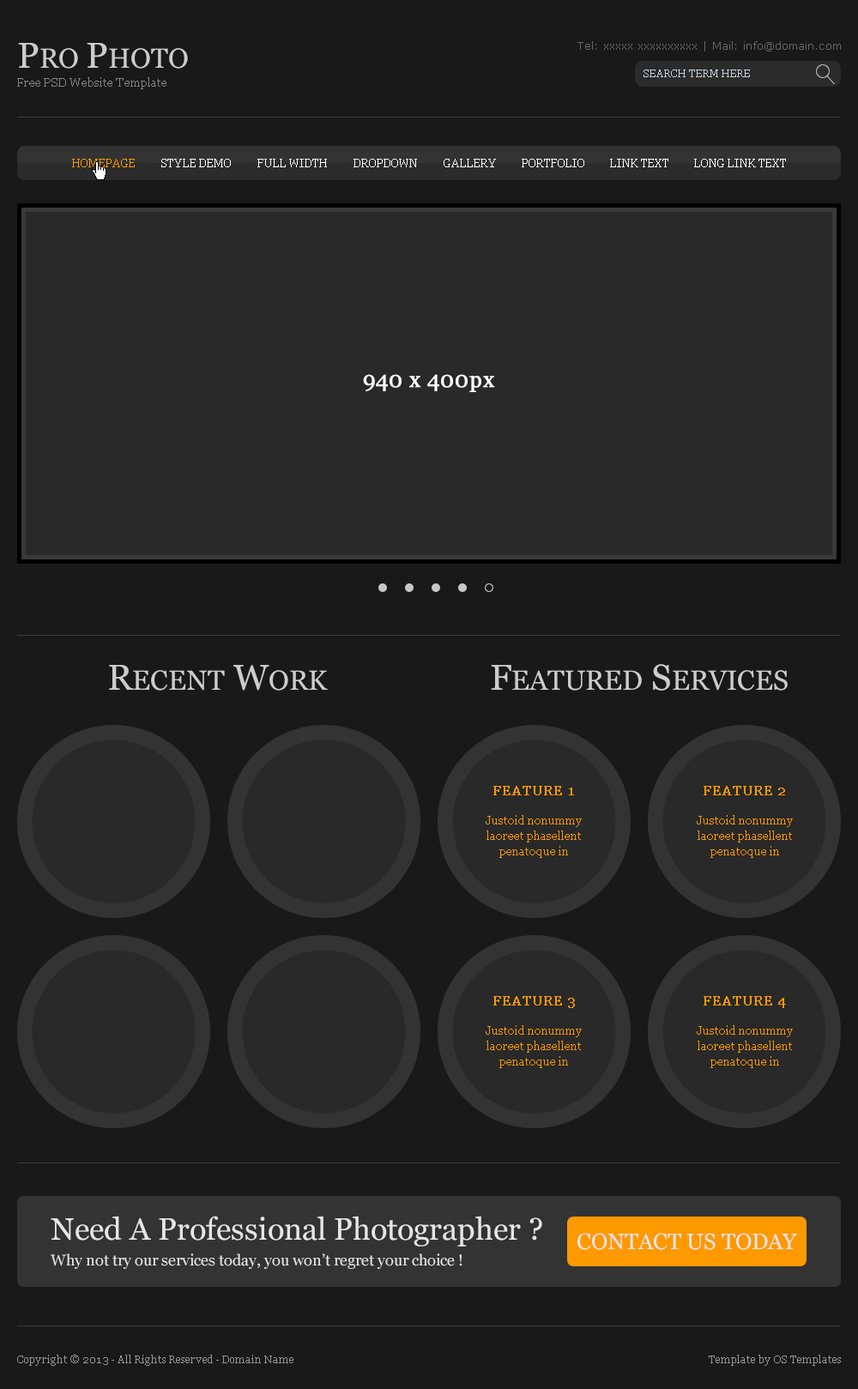
<style>
.page{position:relative;width:858px;height:1389px;background:#191919}
.page>*{position:absolute;margin:0}
.t1{font:11.2px "Verdana";color:#676767}
.t2{font:27.5px "Georgia";color:#cccccc}
.t3{font:36px "Georgia";color:#cccccc}
.t4{font:12px "Georgia";color:#858585}
.t5{font:10.3px "Georgia";color:#c7ced6}
.t6{font:11.2px "Georgia";color:#ff9900}
.t7{font:11.2px "Georgia";color:#ffffff}
.t8{font:22.3px "Georgia";color:#ffffff;font-weight:bold}
.t9{font:13.7px "Georgia";color:#ff9900;font-weight:bold}
.t10{font:11.2px/15.6px "Georgia";color:#ff9900}
.t11{font:30.9px "Georgia";color:#e6e6e6}
.t12{font:22.3px "Georgia";color:#e6e6e6}
.t13{font:15.4px "Georgia";color:#e5e5e5}
.t14{font:10.3px "Georgia";color:#979797}
</style>
<div class="page">
<p class="t1" style="left:578px;top:41px;width:263px;height:10px">Tel: xxxxx xxxxxxxxxx | Mail: info@domain.com</p>
<p class="t2" style="left:18px;top:43px;width:170px;height:26px"><span class="t3">P</span>RO <span class="t3">P</span>HOTO</p>
<p class="t4" style="left:17px;top:77px;width:149px;height:12px">Free PSD Website Template</p>
<p class="t5" style="left:644px;top:70px;width:106px;height:7px">SEARCH TERM HERE</p>
<p class="t6" style="left:72px;top:159px;width:63px;height:8px">HOMEPAGE</p>
<p class="t7" style="left:161px;top:159px;width:70px;height:8px">STYLE DEMO</p>
<p class="t7" style="left:257px;top:159px;width:70px;height:8px">FULL WIDTH</p>
<p class="t7" style="left:354px;top:159px;width:63px;height:8px">DROPDOWN</p>
<p class="t7" style="left:444px;top:159px;width:52px;height:8px">GALLERY</p>
<p class="t7" style="left:522px;top:159px;width:62px;height:8px">PORTFOLIO</p>
<p class="t7" style="left:610px;top:159px;width:59px;height:8px">LINK TEXT</p>
<p class="t7" style="left:694px;top:159px;width:92px;height:8px">LONG LINK TEXT</p>
<p class="t8" style="left:363px;top:374px;width:132px;height:18px">940 x 400px</p>
<p class="t2" style="left:109px;top:665px;width:219px;height:26px"><span class="t3">R</span>ECENT<span class="t3"> W</span>ORK</p>
<p class="t2" style="left:491px;top:664px;width:297px;height:27px"><span class="t3">F</span>EATURED<span class="t3"> S</span>ERVICES</p>
<p class="t9" style="left:493px;top:786px;width:81px;height:10px">FEATURE 1</p>
<p class="t9" style="left:704px;top:786px;width:81px;height:10px">FEATURE 2</p>
<p class="t10" style="left:486px;top:815px;width:96px;height:43px;text-align:center">Justoid nonummy laoreet phasellent penatoque in</p>
<p class="t10" style="left:697px;top:815px;width:96px;height:43px;text-align:center">Justoid nonummy laoreet phasellent penatoque in</p>
<p class="t9" style="left:493px;top:996px;width:82px;height:12px">FEATURE 3</p>
<p class="t9" style="left:704px;top:996px;width:82px;height:12px">FEATURE 4</p>
<p class="t10" style="left:486px;top:1026px;width:96px;height:42px;text-align:center">Justoid nonummy laoreet phasellent penatoque in</p>
<p class="t10" style="left:697px;top:1026px;width:96px;height:42px;text-align:center">Justoid nonummy laoreet phasellent penatoque in</p>
<p class="t11" style="left:51px;top:1216px;width:491px;height:31px">Need A Professional Photographer ?</p>
<p class="t12" style="left:578px;top:1233px;width:219px;height:17px">CONTACT US TODAY</p>
<p class="t13" style="left:51px;top:1254px;width:412px;height:15px">Why not try our services today, you won’t regret your choice !</p>
<p class="t14" style="left:17px;top:1355px;width:277px;height:11px">Copyright © 2013 - All Rights Reserved - Domain Name</p>
<p class="t14" style="left:709px;top:1355px;width:132px;height:11px">Template by OS Templates</p>
</div>
